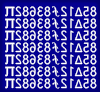
<style>
.page{position:relative;width:100px;height:92px;background:#030092}
.page>*{position:absolute;margin:0}
.t1{font:17px "AppleSymbols";color:#ffffff;scale:0.9 1}
.t2{font:11.1px "AppleSymbols";color:#ffffff;scale:1.38 1}
.t3{font:25px "AppleSymbols";letter-spacing:0.08em;color:#ffffff;scale:0.9 1}
</style>
<div class="page">
<p class="t1" style="left:5px;top:6px;width:92px;height:11px;rotate:180deg">85Δ12<span class="t2">∱</span>83682<span class="t3">π</span></p>
<p class="t1" style="left:5px;top:18px;width:92px;height:11px;rotate:180deg">85Δ12<span class="t2">∱</span>83682<span class="t3">π</span></p>
<p class="t1" style="left:5px;top:30px;width:92px;height:11px;rotate:180deg">85Δ12<span class="t2">∱</span>83682<span class="t3">π</span></p>
<p class="t1" style="left:5px;top:42px;width:92px;height:11px;rotate:180deg">85Δ12<span class="t2">∱</span>83682<span class="t3">π</span></p>
<p class="t1" style="left:5px;top:54px;width:92px;height:11px;rotate:180deg">85Δ12<span class="t2">∱</span>83682<span class="t3">π</span></p>
<p class="t1" style="left:5px;top:66px;width:92px;height:11px;rotate:180deg">85Δ12<span class="t2">∱</span>83682<span class="t3">π</span></p>
<p class="t1" style="left:5px;top:78px;width:92px;height:11px;rotate:180deg">85Δ12<span class="t2">∱</span>83682<span class="t3">π</span></p>
</div>
